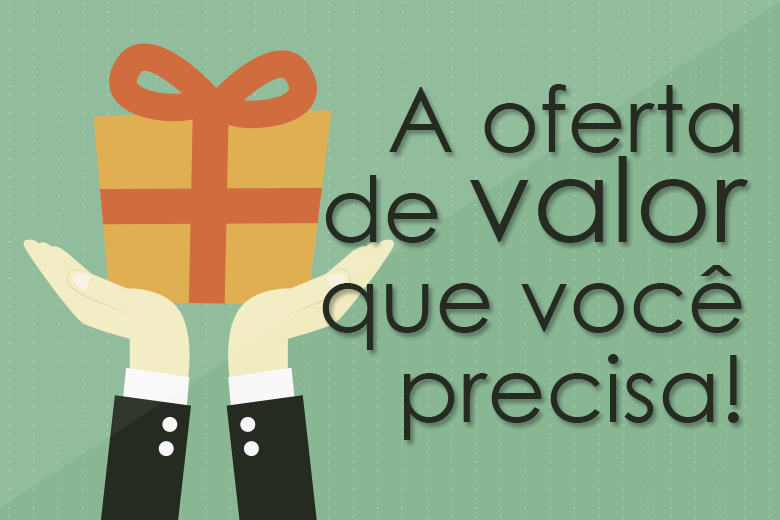
<style>
.page{position:relative;width:780px;height:520px;background:#89b794}
.page>*{position:absolute;margin:0}
.t1{font:90.7px/90px "CenturyGothic";color:#262b22}
.t2{font:116.7px/90px "CenturyGothic";color:#262b22}
</style>
<div class="page">
<p class="t1" style="left:322px;top:84px;width:427px;height:356px;text-align:right">A oferta<br>de <span class="t2">valor<br></span>que você<br>precisa!</p>
</div>
